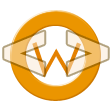
<style>
.page{position:relative;width:112px;height:112px;background:#ffffff}
.page>*{position:absolute;margin:0}
.t1{font:48px "LithosPro-Regular"}
</style>
<div class="page">
<p class="t1" style="left:32px;top:42px;width:49px;height:36px">W</p>
</div>
